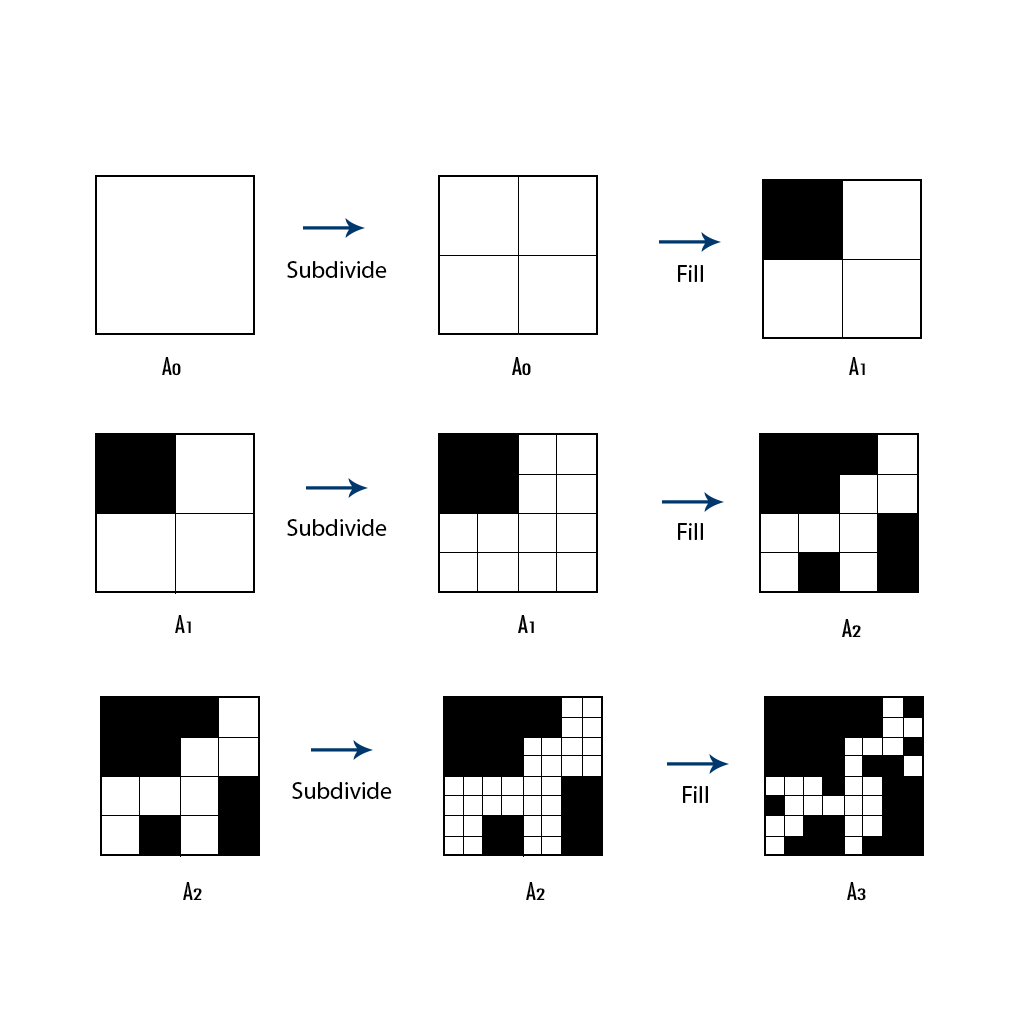
<style>
.page{position:relative;width:1024px;height:1024px;background:#ffffff}
.page>*{position:absolute;margin:0}
.t1{font:24px "MyriadPro-Regular";color:#000000}
.t2{font:24px "Futura-CondensedMedium";color:#000000}
.t3{font:15.4px "Futura-CondensedMedium";color:#000000;scale:1.56 1}
</style>
<div class="page">
<p class="t1" style="left:287px;top:261px;width:100px;height:17px">Subdivide</p>
<p class="t1" style="left:678px;top:265px;width:25px;height:17px">Fill</p>
<p class="t2" style="left:162px;top:357px;width:19px;height:19px">A<span class="t3">0</span></p>
<p class="t2" style="left:849px;top:357px;width:16px;height:18px">A<span class="t3">1</span></p>
<p class="t1" style="left:287px;top:519px;width:100px;height:17px">Subdivide</p>
<p class="t1" style="left:678px;top:523px;width:25px;height:17px">Fill</p>
<p class="t2" style="left:175px;top:615px;width:16px;height:18px">A<span class="t3">1</span></p>
<p class="t1" style="left:292px;top:782px;width:100px;height:17px">Subdivide</p>
<p class="t2" style="left:183px;top:882px;width:19px;height:18px">A<span class="t3">2</span></p>
<p class="t2" style="left:526px;top:882px;width:19px;height:18px">A<span class="t3">2</span></p>
<p class="t2" style="left:847px;top:882px;width:19px;height:19px">A<span class="t3">3</span></p>
</div>
